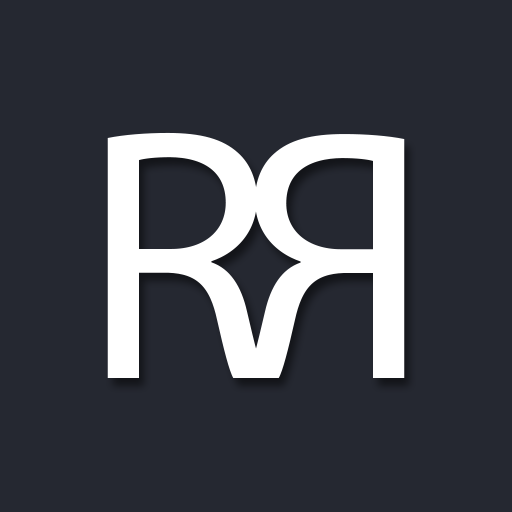
<style>
.page{position:relative;width:512px;height:512px;background:#252831}
.page>*{position:absolute;margin:0}
.t1{font:360.1px "MyriadPro-Regular";color:#ffffff}
.t2{font:359.7px "MyriadPro-Regular";color:#ffffff}
</style>
<div class="page">
<p class="t1" style="left:107px;top:132px;width:159px;height:246px">R</p>
<p class="t2" style="left:246px;top:134px;width:159px;height:244px;rotate:180deg">R</p>
</div>
